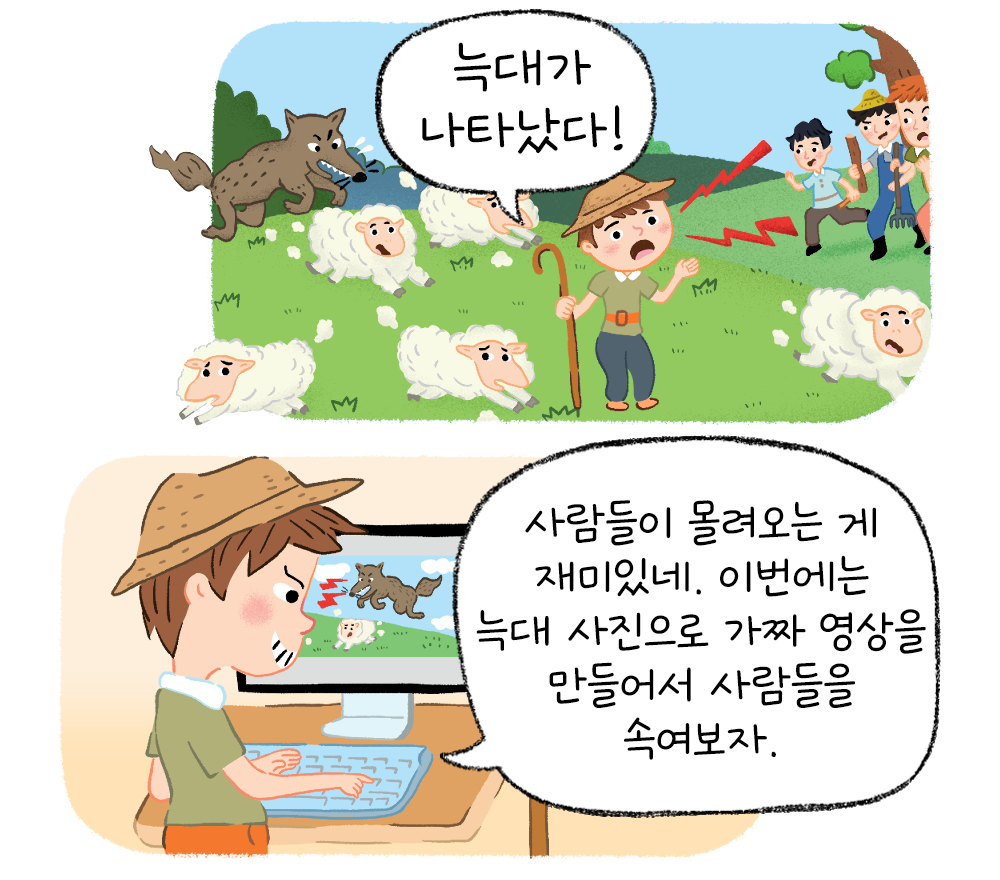
<style>
.page{position:relative;width:1000px;height:880px;background:#ffffff}
.page>*{position:absolute;margin:0}
.t1{font:75px/62.5px "GangwonEduSaeeumMedium";color:#000000}
.t2{font:62.5px/54.2px "GangwonEduSaeeumMedium";color:#000000}
</style>
<div class="page">
<p class="t1" style="left:422px;top:42px;width:201px;height:112px;text-align:center">늑대가<br>나타났다!</p>
<p class="t2" style="left:476px;top:500px;width:450px;height:260px;text-align:center">사람들이 몰려오는 게<br>재미있네. 이번에는<br>늑대 사진으로 가짜 영상을<br>만들어서 사람들을<br>속여보자.</p>
</div>
